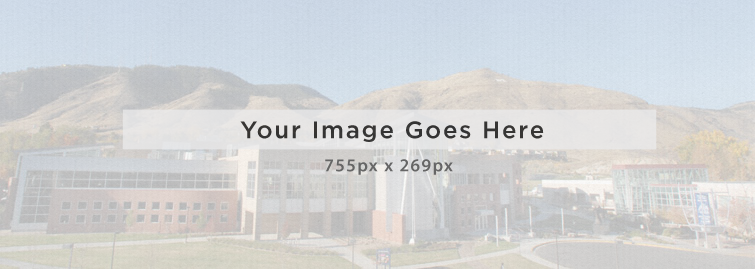
<style>
.page{position:relative;width:755px;height:269px}
.page>*{position:absolute;margin:0}
.t1{font:24px "GothamHTF-Medium";letter-spacing:0.075em;color:#363534}
.t2{font:18px "MyriadPro-Semibold";letter-spacing:0.075em;color:#666666}
</style>
<div class="page">
<p class="t1" style="left:240px;top:121px;width:304px;height:21px">Your Image Goes Here</p>
<p class="t2" style="left:325px;top:159px;width:128px;height:16px">755px x 269px</p>
</div>
